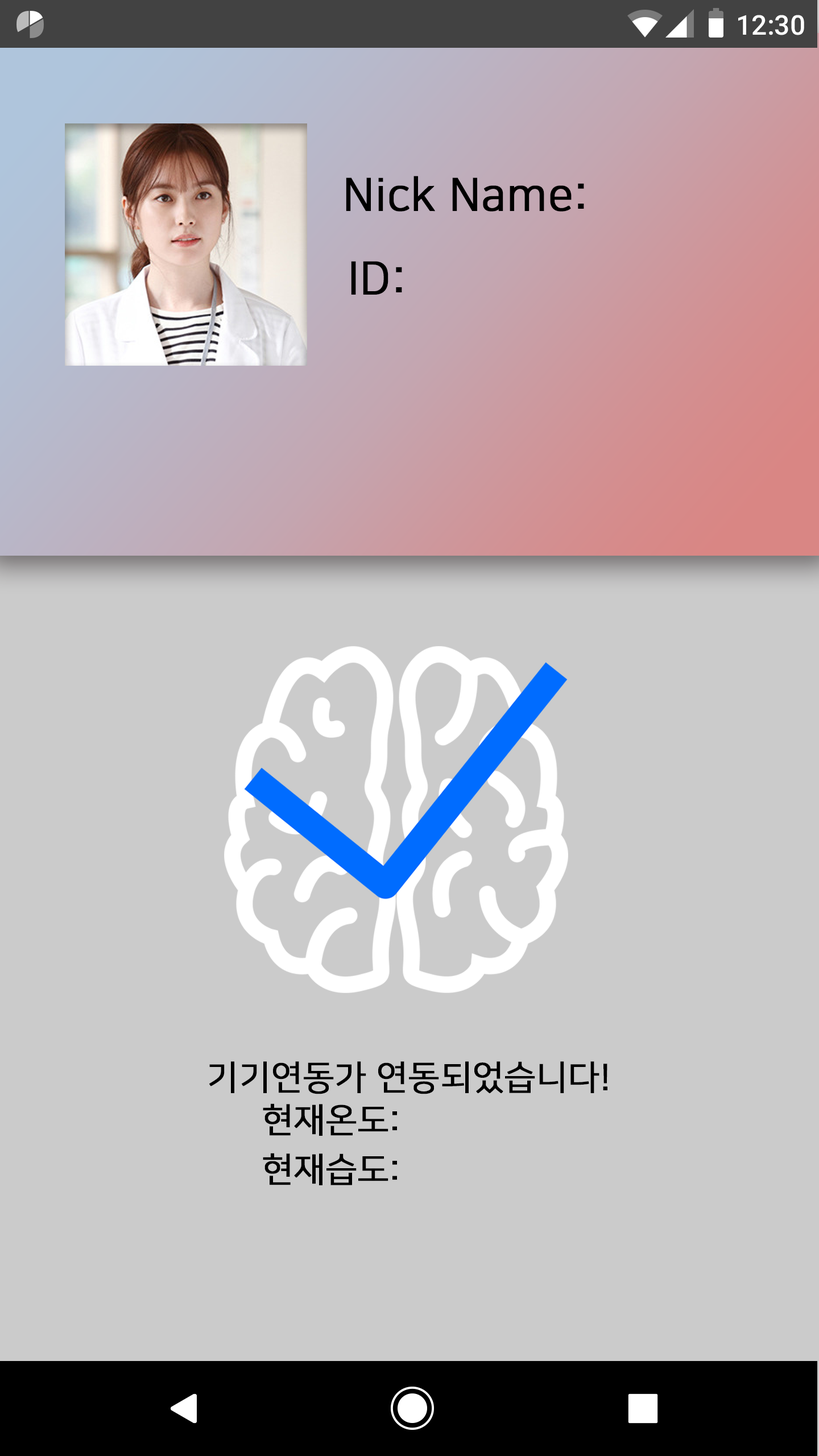
<style>
.page{position:relative;width:819px;height:1456px;background:#cbcbcb}
.page>*{position:absolute;margin:0}
.t1{font:27.3px "Roboto-Medium";color:#ffffff}
.t2{font:45.5px "NanumSquareOTFR";color:#000000;font-weight:bold}
.t3{font:34.1px "NanumSquareOTFR";color:#000000;font-weight:bold}
</style>
<div class="page">
<p class="t1" style="left:738px;top:15px;width:66px;height:20px">12:30</p>
<p class="t2" style="left:346px;top:176px;width:238px;height:36px">Nick Name:</p>
<p class="t2" style="left:351px;top:261px;width:51px;height:34px">ID:</p>
<p class="t3" style="left:209px;top:1061px;width:398px;height:33px">기기연동가 연동되었습니다!</p>
<p class="t3" style="left:263px;top:1103px;width:134px;height:33px">현재온도:</p>
<p class="t3" style="left:263px;top:1153px;width:134px;height:32px">현재습도:</p>
</div>
